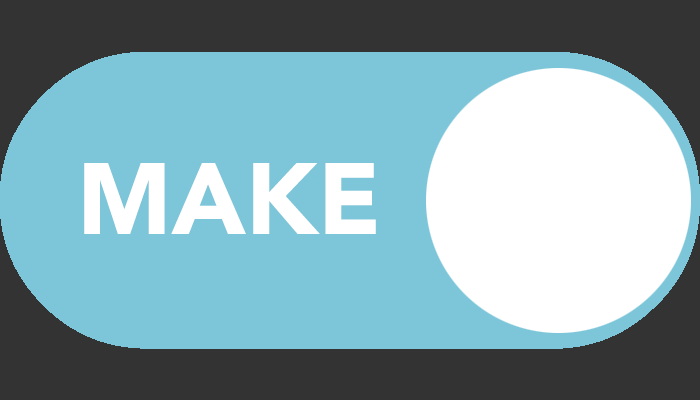
<style>
.page{position:relative;width:700px;height:400px;background:#7dc6d9}
.page>*{position:absolute;margin:0}
.t1{font:100px "Avenir-Black";color:#ffffff}
</style>
<div class="page">
<p class="t1" style="left:84px;top:163px;width:292px;height:71px">MAKE</p>
</div>
